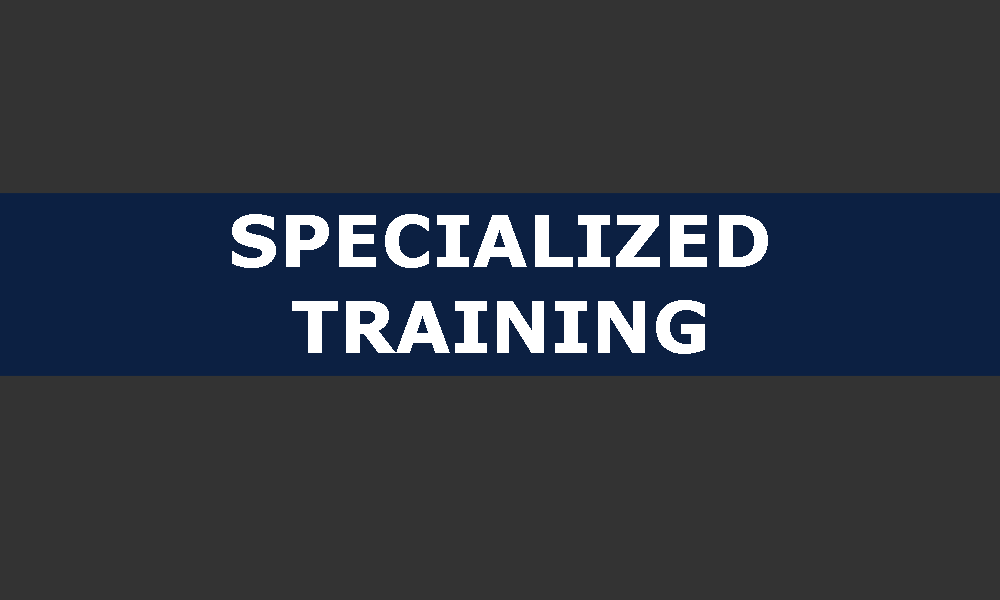
<style>
.page{position:relative;width:1000px;height:600px;background:#333333}
.page>*{position:absolute;margin:0}
.t1{font:72px "Verdana-Bold";color:#ffffff}
</style>
<div class="page">
<p class="t1" style="left:232px;top:214px;width:536px;height:140px;text-align:center">SPECIALIZED<br>TRAINING</p>
</div>
